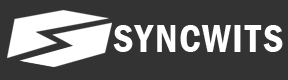
<style>
.page{position:relative;width:288px;height:80px;background:#333333}
.page>*{position:absolute;margin:0}
.t1{font:40px "FranklinGothic-DemiCond";letter-spacing:0.04em;color:#ffffff;text-transform:uppercase}
</style>
<div class="page">
<p class="t1" style="left:113px;top:25px;width:170px;height:27px">syncwits</p>
</div>
